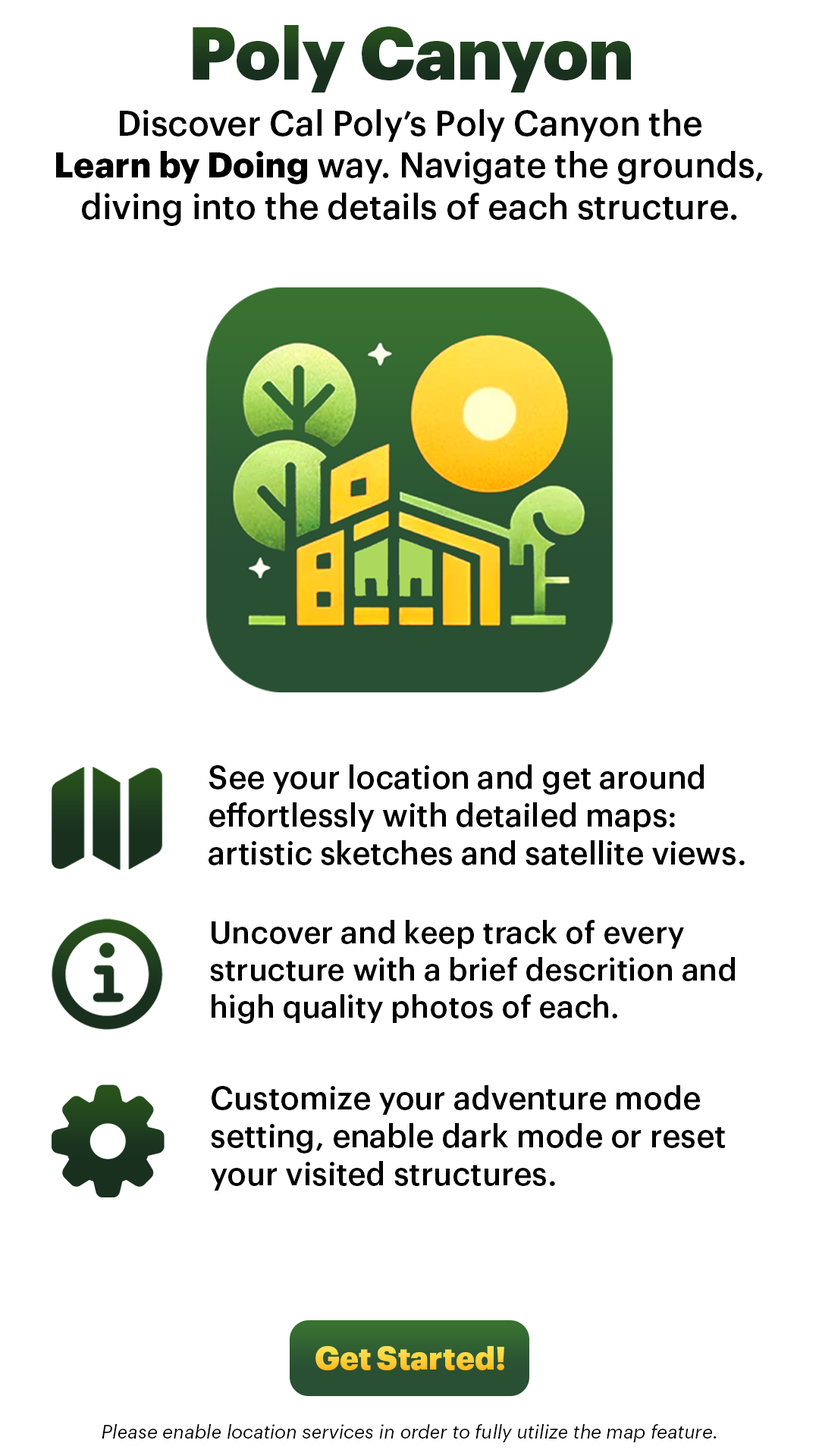
<style>
.page{position:relative;width:819px;height:1456px;background:#ffffff}
.page>*{position:absolute;margin:0}
.t1{font:72.7px "Graphik-Black";color:#1c371f}
.t2{font:34.8px "Graphik-Medium";color:#000000}
.t3{font:34.8px "Graphik-Bold";color:#000000}
.t4{font:31.6px "Graphik-Medium";color:#000000}
.t5{font:31px "Graphik-Medium";color:#000000}
.t6{font:31.6px "Graphik-Black";color:#ffcf3b}
.t7{font:19px "Graphik-RegularItalic";color:#000000}
</style>
<div class="page">
<p class="t1" style="left:193px;top:25px;width:438px;height:68px">Poly Canyon</p>
<p class="t2" style="left:56px;top:109px;width:707px;height:117px;text-align:center">Discover Cal Poly’s Poly Canyon the <br><span class="t3">Learn by Doing</span> way. Navigate the grounds, diving into the details of each structure.</p>
<p class="t4" style="left:209px;top:764px;width:536px;height:101px">See your location and get around  effortlessly with detailed maps:<br>artistic sketches and satellite views.</p>
<p class="t5" style="left:210px;top:920px;width:525px;height:104px">Uncover and keep track of every  <br>structure with a brief descrition and <br>high quality photos of each.</p>
<p class="t4" style="left:211px;top:1085px;width:514px;height:106px">Customize your adventure mode <br>setting, enable dark mode or reset <br>your visited structures.</p>
<p class="t6" style="left:315px;top:1346px;width:189px;height:24px">Get Started!</p>
<p class="t7" style="left:102px;top:1424px;width:615px;height:18px">Please enable location services in order to fully utilize the map feature.</p>
</div>
